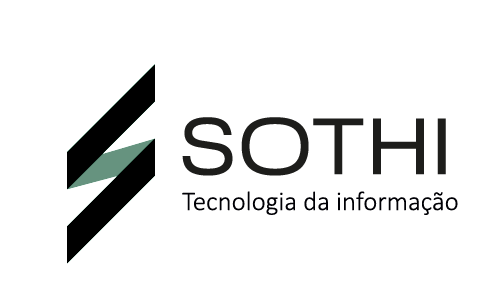
<style>
.page{position:relative;width:500px;height:300px;background:#ffffff}
.page>*{position:absolute;margin:0}
.t1{font:27px "Calibri-Light";color:#000005}
</style>
<div class="page">
<p class="t1" style="left:182px;top:191px;width:276px;height:24px">Tecnologia da informação</p>
</div>
